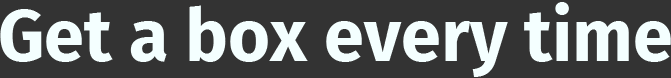
<style>
.page{position:relative;width:671px;height:78px;background:#333333}
.page>*{position:absolute;margin:0}
.t1{font:72px "FiraSans-Bold";color:#f4ffff}
</style>
<div class="page">
<p class="t1" style="left:0px;top:2px;width:671px;height:75px">Get a box every time</p>
</div>
